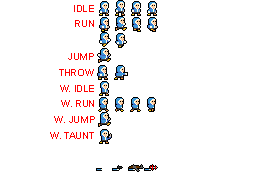
<style>
.page{position:relative;width:264px;height:176px;background:#ffffff}
.page>*{position:absolute;margin:0}
.t1{font:10px "Arial-BoldMT";letter-spacing:-0.04em;color:#ff0000}
</style>
<div class="page">
<p class="t1" style="left:74px;top:5px;width:20px;height:7px">IDLE</p>
<p class="t1" style="left:75px;top:20px;width:19px;height:7px">RUN</p>
<p class="t1" style="left:68px;top:53px;width:26px;height:7px">JUMP</p>
<p class="t1" style="left:59px;top:69px;width:35px;height:7px">THROW</p>
<p class="t1" style="left:60px;top:85px;width:34px;height:7px">W. IDLE</p>
<p class="t1" style="left:61px;top:100px;width:33px;height:7px">W. RUN</p>
<p class="t1" style="left:54px;top:116px;width:41px;height:7px">W. JUMP</p>
<p class="t1" style="left:50px;top:132px;width:44px;height:7px">W. TAUNT</p>
</div>
